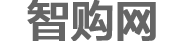
<style>
.page{position:relative;width:181px;height:41px;background:#ffffff}
.page>*{position:absolute;margin:0}
.t1{font:44px "FZLTZHK--GBK1-0";letter-spacing:-0.025em;color:#656565;text-transform:uppercase;font-weight:bold}
</style>
<div class="page">
<p class="t1" style="left:27px;top:0px;width:129px;height:42px">智购网</p>
</div>
